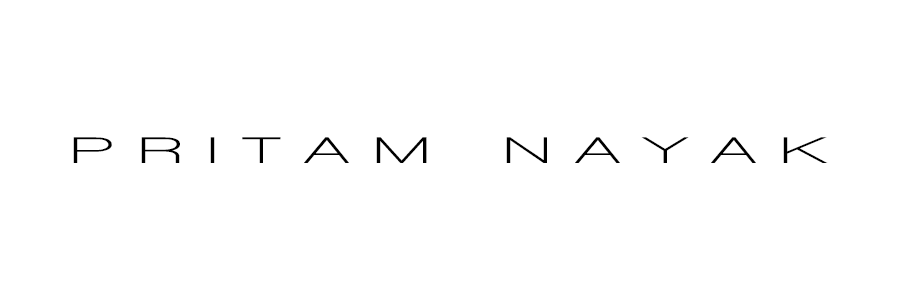
<style>
.page{position:relative;width:900px;height:300px;background:#ffffff}
.page>*{position:absolute;margin:0}
.t1{font:37.8px "WalkwayBold";letter-spacing:0.38em;color:#000000;scale:1.79 1}
</style>
<div class="page">
<p class="t1" style="left:73px;top:137px;width:755px;height:26px">PRITAM NAYAK</p>
</div>
